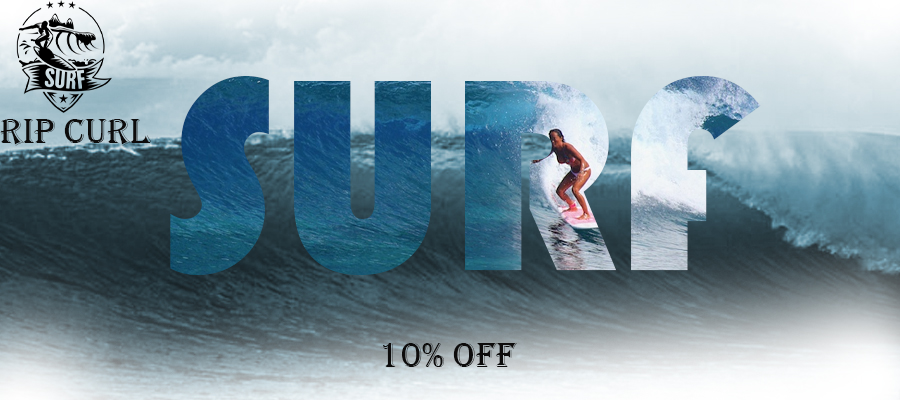
<style>
.page{position:relative;width:900px;height:400px}
.page>*{position:absolute;margin:0}
.t1{font:36px "Algerian";color:#0d0c0c}
</style>
<div class="page">
<p class="t1" style="left:0px;top:119px;width:151px;height:27px">rip curl</p>
<p class="t1" style="left:383px;top:343px;width:134px;height:24px">10% OFF</p>
</div>
